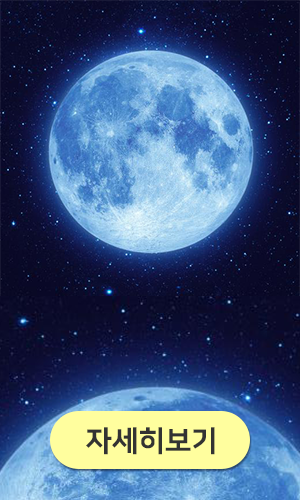
<style>
.page{position:relative;width:300px;height:500px}
.page>*{position:absolute;margin:0}
.t1{font:29.1px "NanumSquareEB";color:#333333}
</style>
<div class="page">
<p class="t1" style="left:86px;top:427px;width:129px;height:28px">자세히보기</p>
</div>
